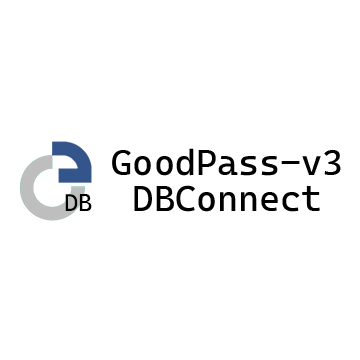
<style>
.page{position:relative;width:360px;height:360px;background:#ffffff}
.page>*{position:absolute;margin:0}
.t1{font:36px/36px "CascadiaCode-Roman";color:#000000}
.t2{font:24px "CascadiaCode-Roman";color:#000000}
</style>
<div class="page">
<p class="t1" style="left:112px;top:148px;width:229px;height:64px">GoodPass-v3<br> DBConnect</p>
<p class="t2" style="left:65px;top:194px;width:27px;height:17px">DB</p>
</div>
